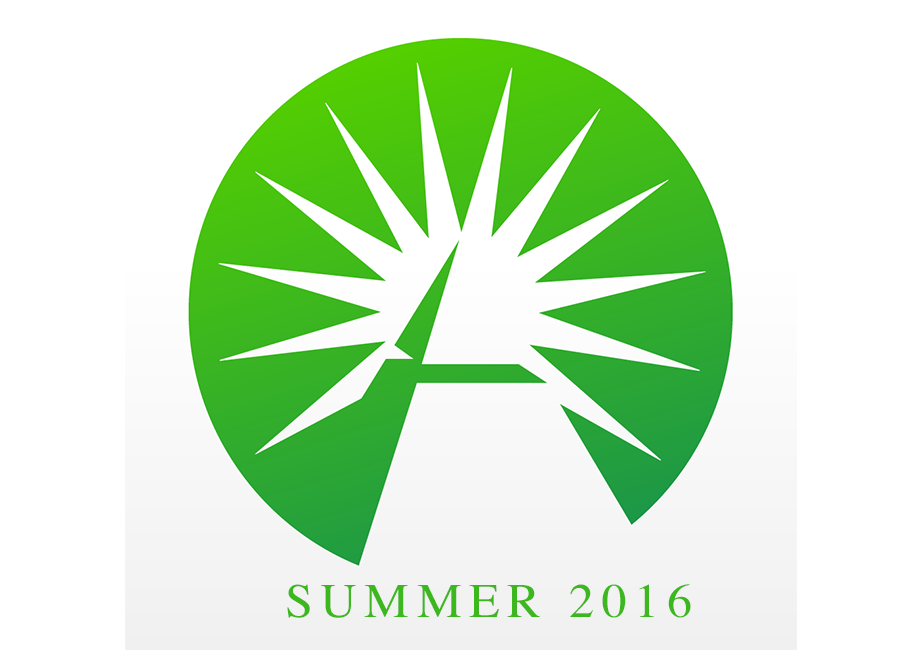
<style>
.page{position:relative;width:900px;height:650px;background:#ffffff}
.page>*{position:absolute;margin:0}
.t1{font:48px "Times-Roman";letter-spacing:0.15em;color:#3cb71e;text-transform:uppercase;scale:1.05 1}
</style>
<div class="page">
<p class="t1" style="left:287px;top:584px;width:404px;height:34px">Summer 2016</p>
</div>
